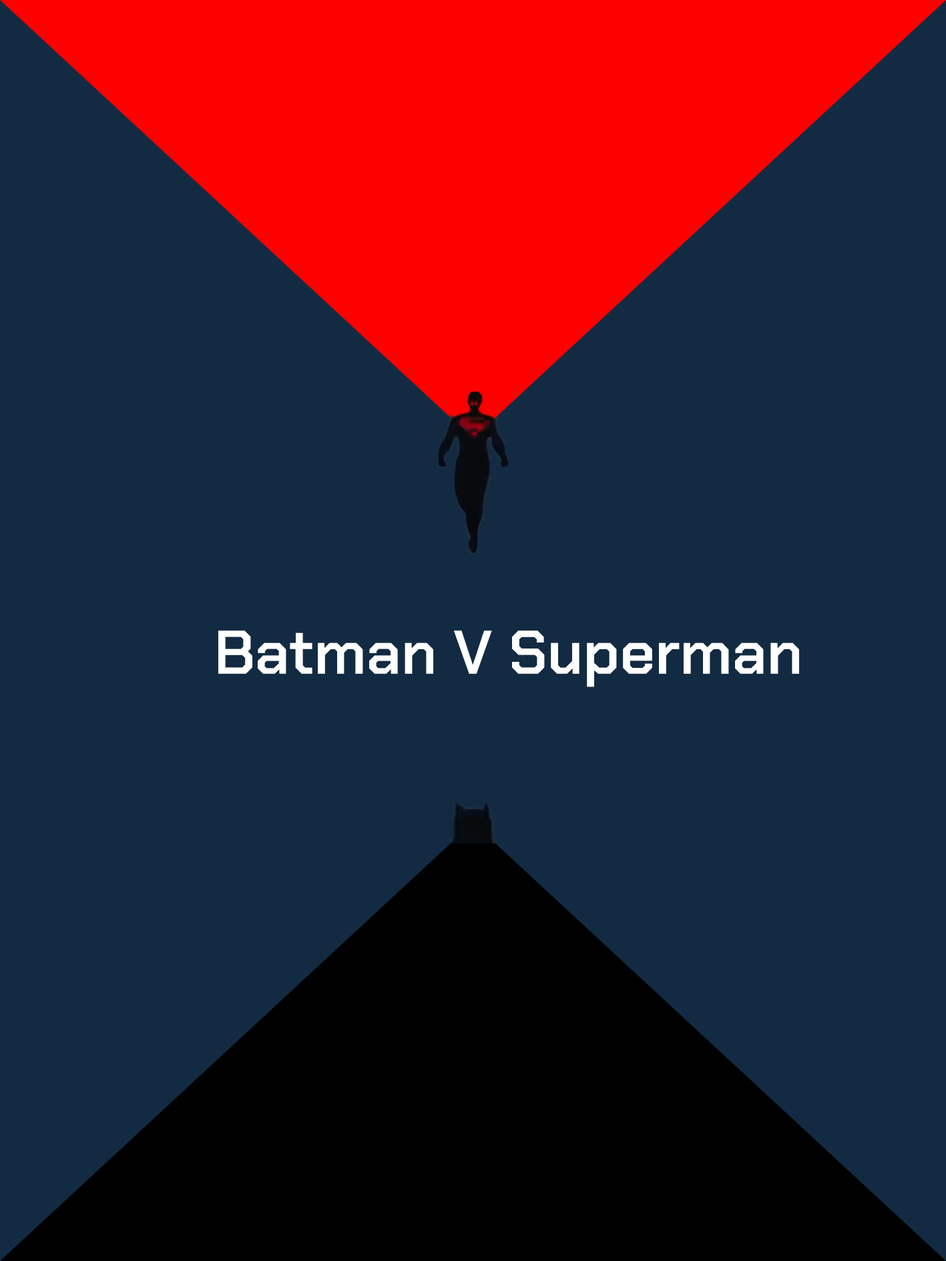
<style>
.page{position:relative;width:946px;height:1261px;background:#122b42}
.page>*{position:absolute;margin:0}
.t1{font:61.4px "ChakraPetch-SemiBold";color:#ffffff}
</style>
<div class="page">
<p class="t1" style="left:218px;top:631px;width:581px;height:56px">Batman V Superman</p>
</div>
